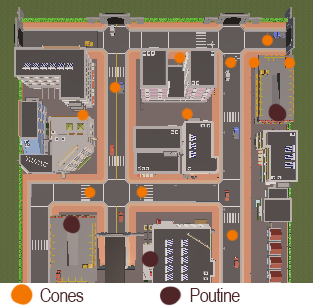
<style>
.page{position:relative;width:313px;height:307px}
.page>*{position:absolute;margin:0}
.t1{font:20px "ArialNarrow";letter-spacing:-0.04em;color:#4f2528}
</style>
<div class="page">
<p class="t1" style="left:40px;top:288px;width:44px;height:14px">Cones</p>
<p class="t1" style="left:190px;top:288px;width:50px;height:14px">Poutine</p>
</div>
